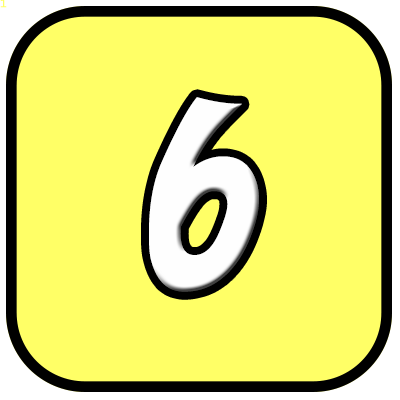
<style>
.page{position:relative;width:400px;height:400px;background:#ffff66}
.page>*{position:absolute;margin:0}
.t1{font:10.7px "LucidaConsole";color:#ffff66}
.t2{font:240px "Yikes";color:#fefefe}
</style>
<div class="page">
<p class="t1" style="left:0px;top:0px;width:7px;height:8px">1</p>
<p class="t2" style="left:149px;top:97px;width:110px;height:195px">6</p>
</div>
